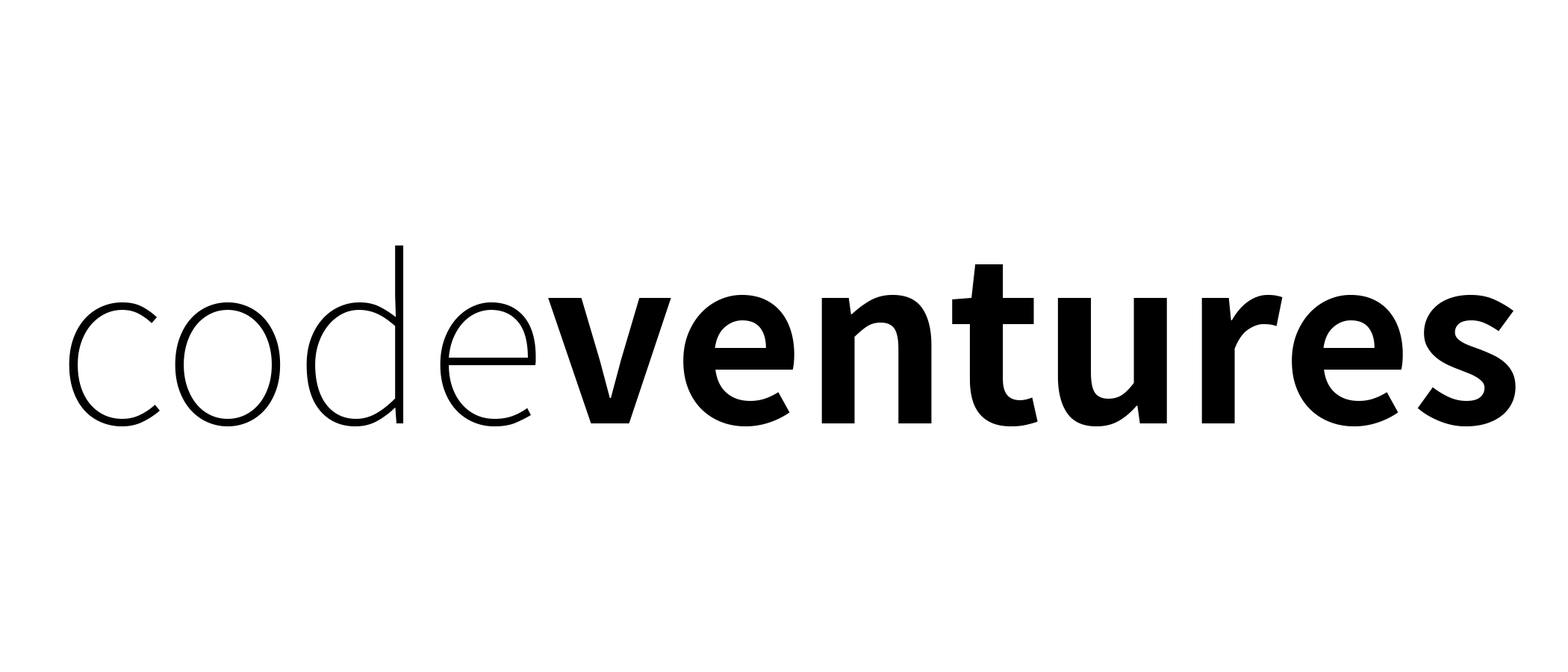
<style>
.page{position:relative;width:1568px;height:672px;background:#ffffff}
.page>*{position:absolute;margin:0}
.t1{font:224px "SpoqaHanSans-Bold";color:#000000}
.t2{font:224px "SpoqaHanSans-Thin";color:#000000}
</style>
<div class="page">
<p class="t1" style="left:69px;top:245px;width:1447px;height:181px"><span class="t2">code</span>ventures</p>
</div>
